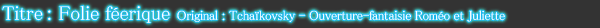
<style>
.page{position:relative;width:600px;height:28px;background:#333333}
.page>*{position:absolute;margin:0}
.t1{font:13.3px "MS-PMincho";letter-spacing:-0.025em;color:#ffffff}
.t2{font:20px "MS-PMincho";color:#ffffff}
</style>
<div class="page">
<p class="t1" style="left:2px;top:5px;width:503px;height:18px"><span class="t2">Titre : Folie féerique </span>Original : Tchaïkovsky - Ouverture-fantaisie Roméo et Juliette</p>
</div>
